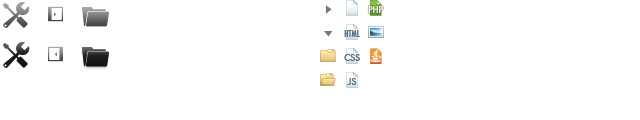
<style>
.page{position:relative;width:640px;height:120px;background:#ffffff}
.page>*{position:absolute;margin:0}
.t1{font:9.2px "Futura-Medium";color:#ffffff;scale:0.87 1}
.t2{font:9.2px "Futura-CondensedMedium";color:#4c6c7b}
.t3{font:9.2px "Futura-Medium";color:#4c6c7b;scale:0.93 1}
</style>
<div class="page">
<p class="t1" style="left:368px;top:5px;width:15px;height:9px">PHP</p>
<p class="t2" style="left:344px;top:30px;width:16px;height:7px">HTML</p>
<p class="t3" style="left:344px;top:54px;width:16px;height:7px">CSS</p>
<p class="t3" style="left:347px;top:78px;width:10px;height:7px">JS</p>
</div>
